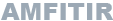
<style>
.page{position:relative;width:113px;height:21px;background:#ffffff}
.page>*{position:absolute;margin:0}
.t1{font:24px "Arial-Black";color:#9ca9b5}
</style>
<div class="page">
<p class="t1" style="left:1px;top:3px;width:113px;height:17px">AMFITIR</p>
</div>
